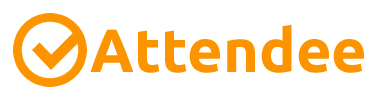
<style>
.page{position:relative;width:378px;height:100px;background:#ffffff}
.page>*{position:absolute;margin:0}
.t1{font:43.8px "Ubuntu-Bold";color:#fc9400}
</style>
<div class="page">
<p class="t1" style="left:90px;top:24px;width:274px;height:49px">Attendee</p>
</div>
